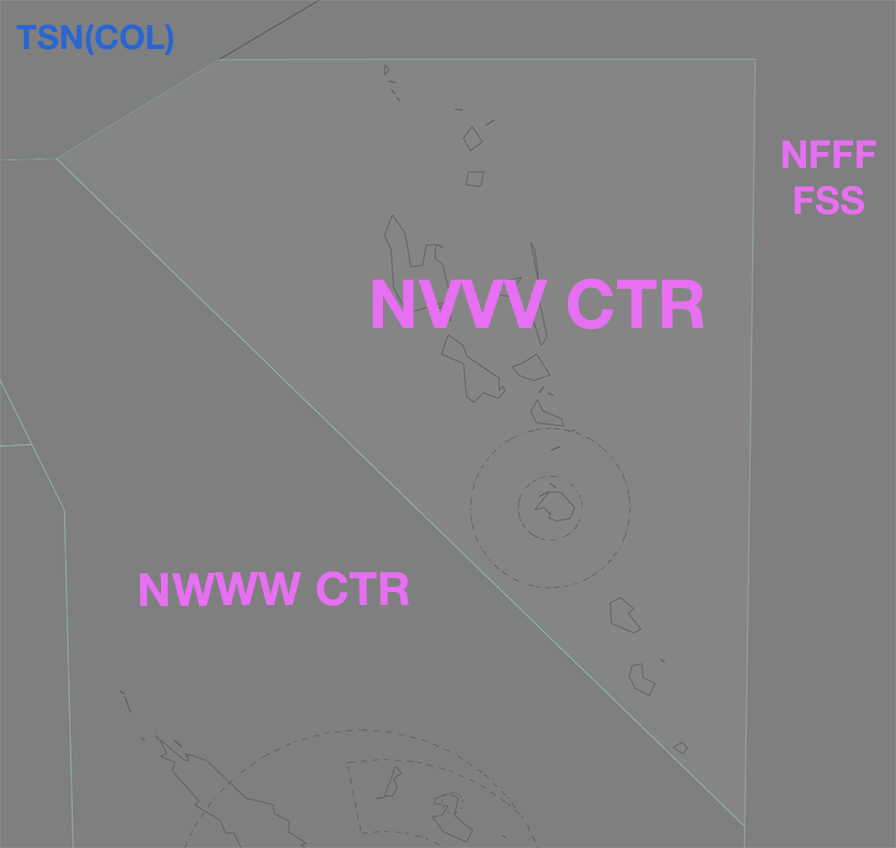
<style>
.page{position:relative;width:896px;height:848px;background:#7f7f7f}
.page>*{position:absolute;margin:0}
.t1{font:33.8px "HelveticaNeue-Bold";color:#2967cf}
.t2{font:38.7px "HelveticaNeue-Bold";color:#e670f1}
.t3{font:67.8px "HelveticaNeue-Bold";color:#e670f1}
.t4{font:46px "HelveticaNeue-Bold";color:#e670f1}
</style>
<div class="page">
<p class="t1" style="left:16px;top:24px;width:158px;height:31px">TSN(COL)</p>
<p class="t2" style="left:782px;top:140px;width:94px;height:75px;text-align:center">NFFF<br>FSS</p>
<p class="t3" style="left:372px;top:278px;width:332px;height:52px">NVVV CTR</p>
<p class="t4" style="left:140px;top:571px;width:269px;height:35px">NWWW CTR</p>
</div>
